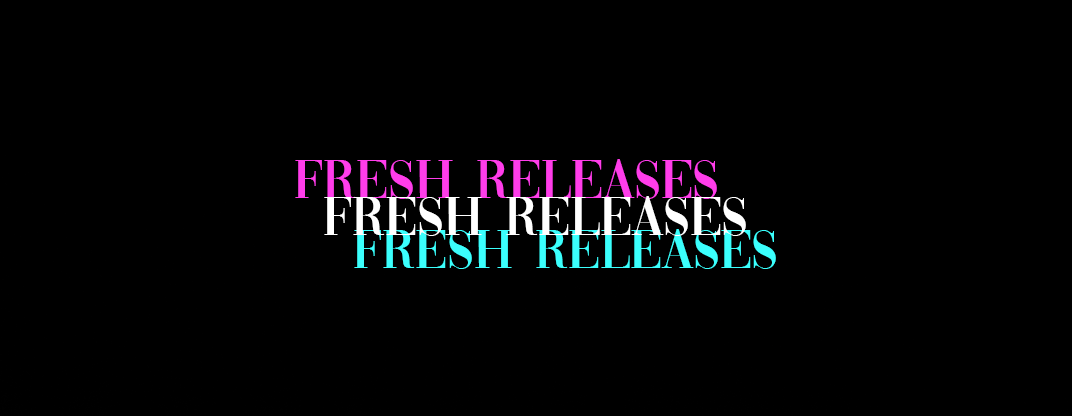
<style>
.page{position:relative;width:1072px;height:416px;background:#000000}
.page>*{position:absolute;margin:0}
.t1{font:57px "Vogue-Regular";color:#ff3dea}
.t2{font:57px "Vogue-Regular";color:#ffffff}
.t3{font:57px "Vogue-Regular";color:#3bfffd}
</style>
<div class="page">
<p class="t1" style="left:295px;top:159px;width:422px;height:40px">FRESH RELEASES</p>
<p class="t2" style="left:324px;top:196px;width:422px;height:40px">FRESH RELEASES</p>
<p class="t3" style="left:354px;top:229px;width:422px;height:40px">FRESH RELEASES</p>
</div>
